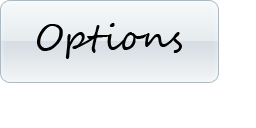
<style>
.page{position:relative;width:256px;height:128px;background:#ffffff}
.page>*{position:absolute;margin:0}
.t1{font:36px "SegoeScript";color:#000000}
</style>
<div class="page">
<p class="t1" style="left:37px;top:23px;width:145px;height:36px">Options</p>
</div>
